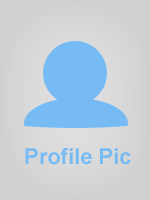
<style>
.page{position:relative;width:150px;height:200px}
.page>*{position:absolute;margin:0}
.t1{font:22px "Arial-BoldMT";color:#77bbf5}
</style>
<div class="page">
<p class="t1" style="left:25px;top:148px;width:106px;height:17px">Profile Pic</p>
</div>
